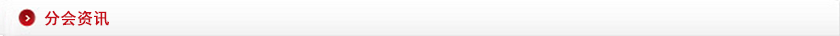
<style>
.page{position:relative;width:840px;height:36px}
.page>*{position:absolute;margin:0}
.t1{font:16px "SimHei";letter-spacing:-0.005em;color:#c50d18;font-weight:bold}
</style>
<div class="page">
<p class="t1" style="left:44px;top:10px;width:65px;height:16px">分会资讯</p>
</div>
